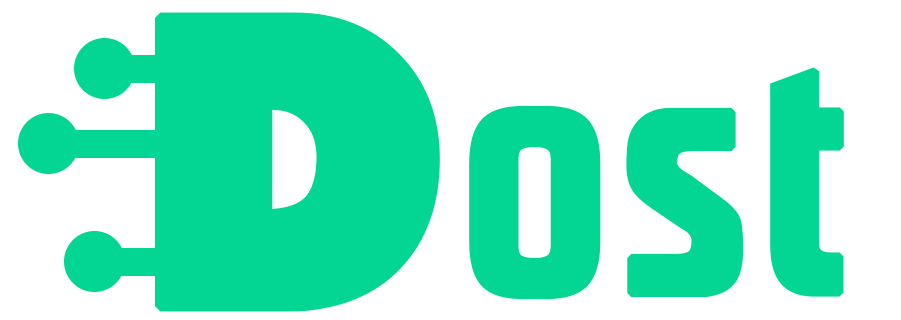
<style>
.page{position:relative;width:901px;height:320px;background:#ffffff}
.page>*{position:absolute;margin:0}
.t1{font:400px "OpineHeavy";color:#03d592;font-weight:bold}
.t2{font:300px "PhrasticMedium";color:#03d592;font-weight:bold}
</style>
<div class="page">
<p class="t1" style="left:154px;top:12px;width:286px;height:300px">D</p>
<p class="t2" style="left:469px;top:67px;width:375px;height:233px">ost</p>
</div>
